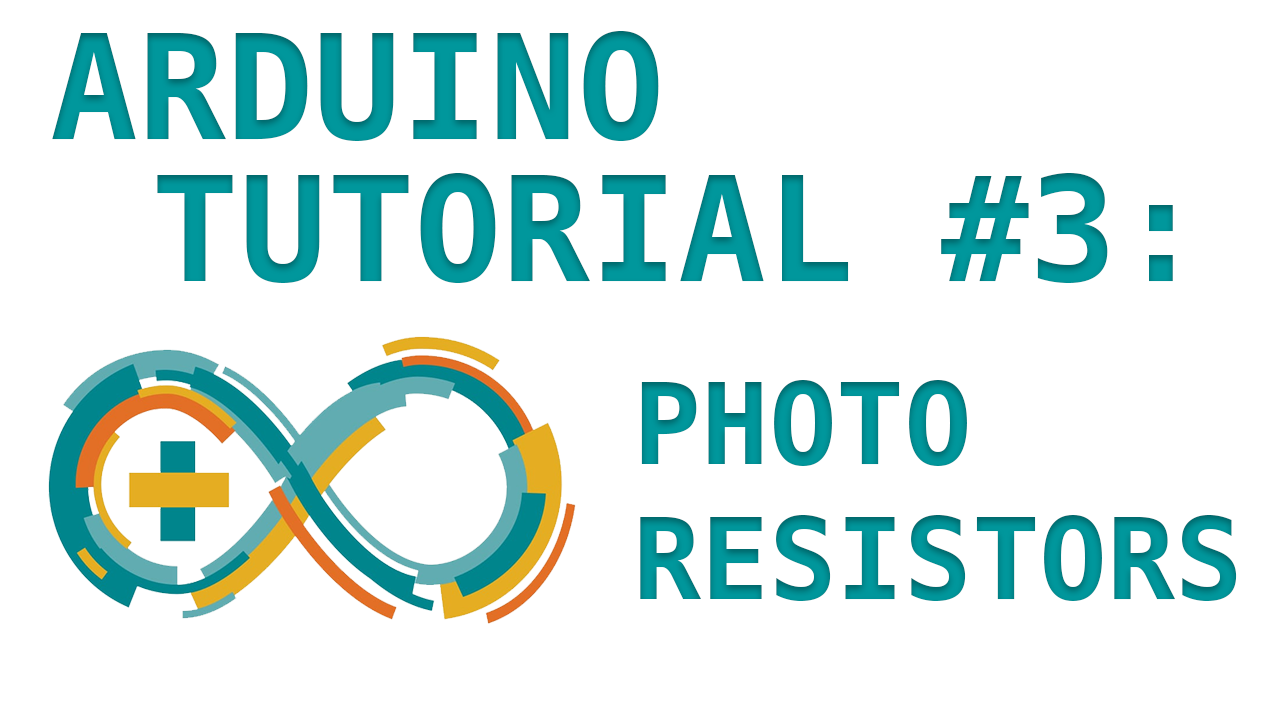
<style>
.page{position:relative;width:1280px;height:720px;background:#ffffff}
.page>*{position:absolute;margin:0}
.t1{font:145.8px "Menlo-Bold";color:#00979c}
.t2{font:112.5px "Menlo-Bold";color:#00979c}
</style>
<div class="page">
<p class="t1" style="left:52px;top:31px;width:607px;height:110px">ARDUINO</p>
<p class="t1" style="left:157px;top:173px;width:1016px;height:110px">TUTORIAL #3:</p>
<p class="t2" style="left:640px;top:380px;width:597px;height:221px">PHOTO<br>RESISTORS</p>
</div>
